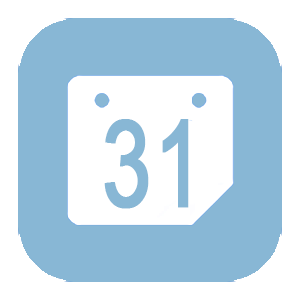
<style>
.page{position:relative;width:300px;height:300px;background:#88b7d5}
.page>*{position:absolute;margin:0}
.t1{font:121px "ArialMT";color:#88b7d5;font-weight:bold;scale:0.73 1}
</style>
<div class="page">
<p class="t1" style="left:104px;top:119px;width:85px;height:90px">31</p>
</div>
